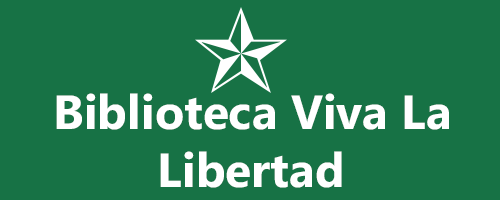
<style>
.page{position:relative;width:500px;height:200px;background:#177245}
.page>*{position:absolute;margin:0}
.t1{font:48px "MicrosoftPhagsPa-Bold";color:#ffffff}
</style>
<div class="page">
<p class="t1" style="left:56px;top:93px;width:393px;height:95px;text-align:center">Biblioteca Viva La <br>Libertad</p>
</div>
